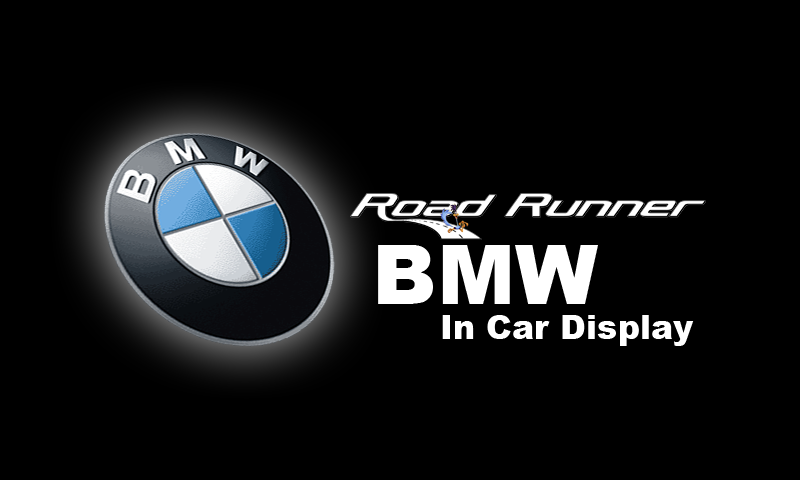
<style>
.page{position:relative;width:800px;height:480px;background:#000000}
.page>*{position:absolute;margin:0}
.t1{font:83.3px "Arial-Black";color:#ffffff}
.t2{font:33.3px "Arial-Black";color:#ffffff}
</style>
<div class="page">
<p class="t1" style="left:378px;top:245px;width:220px;height:59px">BMW</p>
<p class="t2" style="left:442px;top:315px;width:252px;height:31px">In Car Display</p>
</div>
